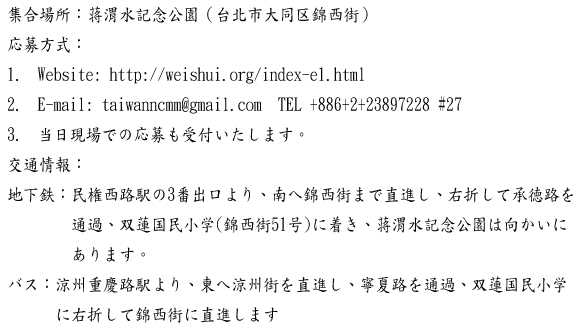
<style>
.page{position:relative;width:576px;height:330px;background:#ffffff}
.page>*{position:absolute;margin:0}
.t1{font:18px/30px "DFKaiShu-SB-Estd-BF";color:#060606;scale:0.89 1}
</style>
<div class="page">
<p class="t1" style="left:8px;top:6px;width:565px;height:317px">集合場所：蒋渭水記念公園（台北市大同区錦西街）<br>応募方式：<br>1. Website: http://weishui.org/index-e1.html<br>2. E-mail: taiwanncmm@gmail.com  TEL +886+2+23897228 #27 <br>3. 当日現場での応募も受付いたします。<br>交通情報：<br>地下鉄：民権西路駅の3番出口より、南へ錦西街まで直進し、右折して承徳路を<br>        通過、双蓮国民小学(錦西街51号)に着き、蒋渭水記念公園は向かいに<br>        あります。<br>バス：涼州重慶路駅より、東へ涼州街を直進し、寧夏路を通過、双蓮国民小学<br>      に右折して錦西街に直進します</p>
</div>
